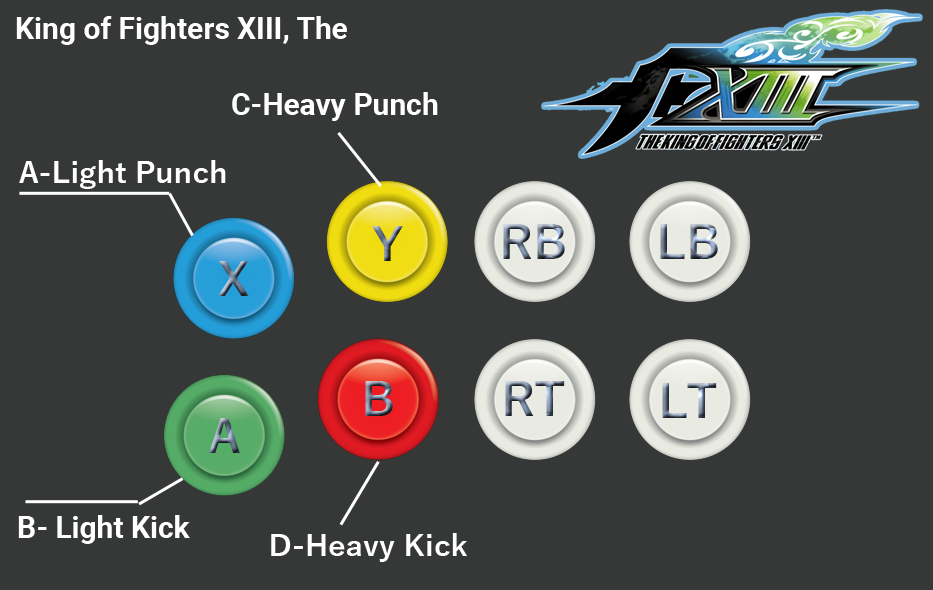
<style>
.page{position:relative;width:933px;height:590px;background:#363838}
.page>*{position:absolute;margin:0}
.t1{font:30px "Roboto-Bold";color:#ffffff}
.t2{font:30px "YuGothic-Bold";color:#ffffff}
</style>
<div class="page">
<p class="t1" style="left:16px;top:16px;width:331px;height:29px">King of Fighters XIII, The</p>
<p class="t1" style="left:232px;top:92px;width:206px;height:29px">C-Heavy Punch</p>
<p class="t2" style="left:19px;top:160px;width:207px;height:29px">A-Light Punch</p>
<p class="t1" style="left:18px;top:515px;width:172px;height:29px">B- Light Kick</p>
<p class="t2" style="left:271px;top:533px;width:196px;height:29px">D-Heavy Kick</p>
</div>
